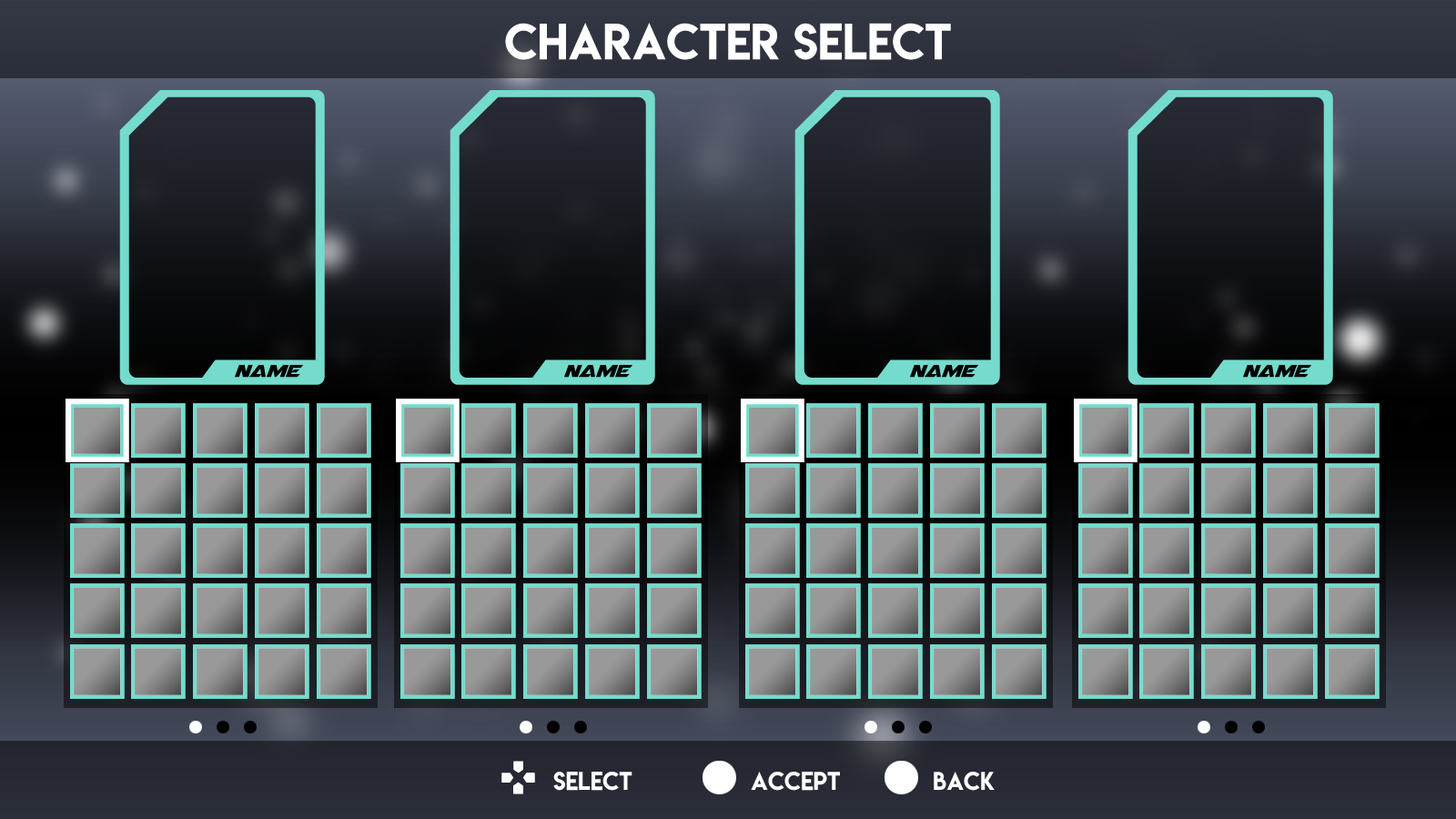
<style>
.page{position:relative;width:1456px;height:819px}
.page>*{position:absolute;margin:0}
.t1{font:45.5px "LemonMilk";color:#ffffff}
.t2{font:22.7px "Airstrike";color:#000000}
.t3{font:22.7px "LemonMilk";color:#ffffff}
</style>
<div class="page">
<p class="t1" style="left:505px;top:23px;width:446px;height:37px">CHARACTER SELECT</p>
<p class="t2" style="left:235px;top:365px;width:68px;height:13px">NAME</p>
<p class="t2" style="left:564px;top:365px;width:68px;height:13px">NAME</p>
<p class="t2" style="left:910px;top:365px;width:68px;height:13px">NAME</p>
<p class="t2" style="left:1243px;top:365px;width:68px;height:13px">NAME</p>
<p class="t3" style="left:553px;top:772px;width:79px;height:19px">SELECT</p>
<p class="t3" style="left:751px;top:772px;width:89px;height:19px">ACCEPT</p>
<p class="t3" style="left:934px;top:772px;width:61px;height:19px">BACK</p>
</div>
